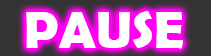
<style>
.page{position:relative;width:211px;height:56px;background:#ffffff}
.page>*{position:absolute;margin:0}
.t1{font:53.3px "BerlinSansFBDemi-Bold";color:#ffffff}
</style>
<div class="page">
<p class="t1" style="left:26px;top:11px;width:157px;height:38px">PAUSE</p>
</div>
